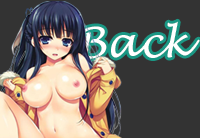
<style>
.page{position:relative;width:200px;height:138px;background:#333333}
.page>*{position:absolute;margin:0}
.t1{font:40.9px "LucidaHandwriting-Italic";color:#ffffff}
</style>
<div class="page">
<p class="t1" style="left:78px;top:21px;width:122px;height:38px">Back</p>
</div>
